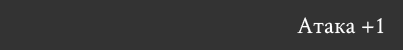
<style>
.page{position:relative;width:403px;height:50px;background:#333333}
.page>*{position:absolute;margin:0}
.t1{font:24px "CrimsonText-Regular";color:#ffffff}
</style>
<div class="page">
<p class="t1" style="left:297px;top:17px;width:87px;height:17px">Атака +1</p>
</div>
